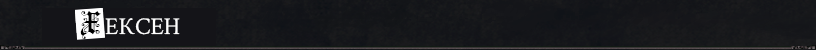
<style>
.page{position:relative;width:816px;height:50px}
.page>*{position:absolute;margin:0}
.t1{font:24px "CrimsonText-Regular";color:#ffffff}
.t2{font:30px "FortunaGothicFlorishC";color:#000000}
</style>
<div class="page">
<p class="t1" style="left:80px;top:11px;width:100px;height:28px"><span class="t2">Х </span>ЕКСЕН</p>
</div>
